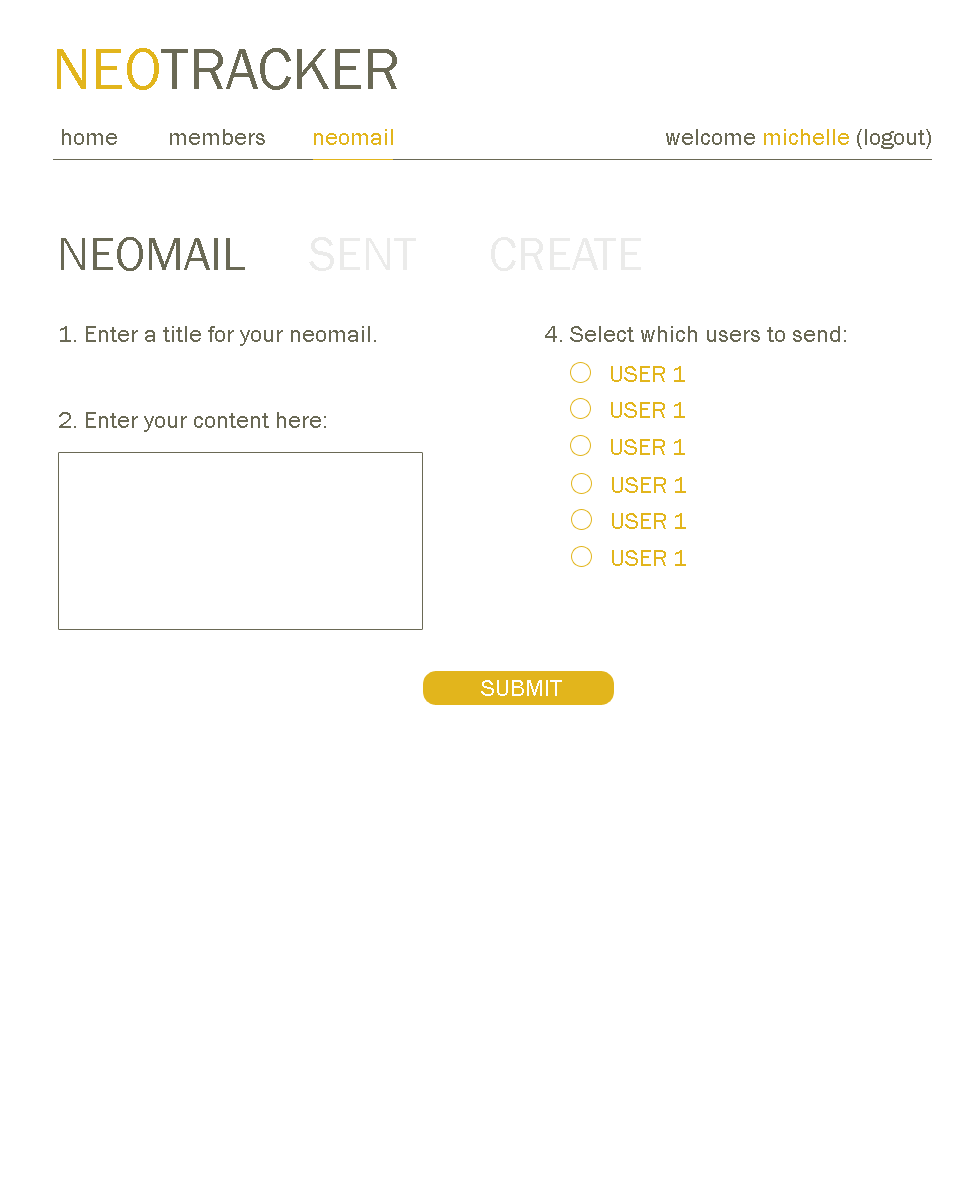
<style>
.page{position:relative;width:960px;height:1200px;background:#ffffff}
.page>*{position:absolute;margin:0}
.t1{font:60px "FranklinGothic-Book";color:#6a6955}
.t2{font:60px "FranklinGothic-Book";color:#e2b51c}
.t3{font:24px "FranklinGothic-Book";color:#6a6955}
.t4{font:24px "FranklinGothic-Book";color:#e2b51c}
.t5{font:48px "FranklinGothic-Book";color:#ebebea}
.t6{font:48px "FranklinGothic-Book";color:#6a6955}
.t7{font:24px "FranklinGothic-Book";color:#fffffe}
</style>
<div class="page">
<p class="t1" style="left:57px;top:48px;width:340px;height:42px"><span class="t2">NEO</span>TRACKER</p>
<p class="t1" style="left:57px;top:48px;width:340px;height:42px"><span class="t2">NEO</span>TRACKER</p>
<p class="t3" style="left:62px;top:129px;width:331px;height:16px">home   members   <span class="t4">neomail</span></p>
<p class="t3" style="left:62px;top:129px;width:331px;height:16px">home   members   <span class="t4">neomail</span></p>
<p class="t4" style="left:666px;top:129px;width:265px;height:20px"><span class="t3">welcome </span>michelle <span class="t3">(logout)</span></p>
<p class="t4" style="left:666px;top:129px;width:265px;height:20px"><span class="t3">welcome </span>michelle <span class="t3">(logout)</span></p>
<p class="t5" style="left:61px;top:237px;width:580px;height:34px"><span class="t6">NEOMAIL  </span>SENT  CREATE</p>
<p class="t5" style="left:61px;top:237px;width:580px;height:34px"><span class="t6">NEOMAIL  </span>SENT  CREATE</p>
<p class="t3" style="left:59px;top:326px;width:317px;height:106px">1. Enter a title for your neomail.<br><br><br>2. Enter your content here:</p>
<p class="t3" style="left:545px;top:326px;width:301px;height:16px">4. Select which users to send:</p>
<p class="t4" style="left:611px;top:366px;width:74px;height:16px">USER 1</p>
<p class="t4" style="left:611px;top:402px;width:74px;height:16px">USER 1</p>
<p class="t4" style="left:611px;top:439px;width:74px;height:16px">USER 1</p>
<p class="t4" style="left:612px;top:477px;width:74px;height:16px">USER 1</p>
<p class="t4" style="left:612px;top:513px;width:74px;height:16px">USER 1</p>
<p class="t4" style="left:612px;top:550px;width:74px;height:16px">USER 1</p>
<p class="t7" style="left:481px;top:680px;width:81px;height:16px">SUBMIT</p>
</div>
